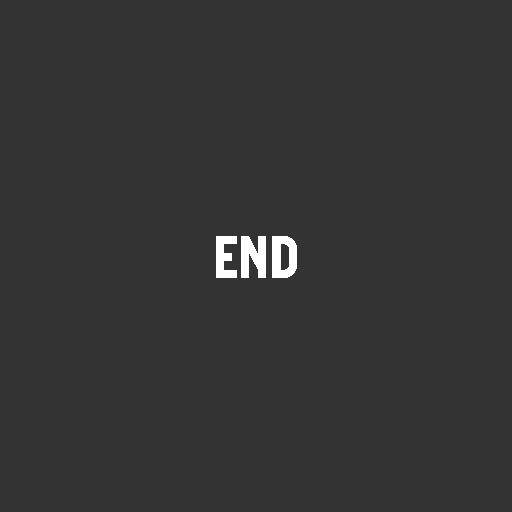
<style>
.page{position:relative;width:512px;height:512px;background:#333333}
.page>*{position:absolute;margin:0}
.t1{font:42px "NTCornelia-Regular";color:#fffefe}
</style>
<div class="page">
<p class="t1" style="left:216px;top:236px;width:81px;height:42px">END</p>
</div>
